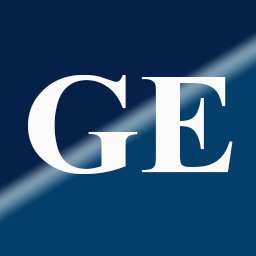
<style>
.page{position:relative;width:256px;height:256px;background:#043e6a}
.page>*{position:absolute;margin:0}
.t1{font:144px "TimesNewRomanPS-BoldMT";color:#fbfbfc;scale:1.04 1}
</style>
<div class="page">
<p class="t1" style="left:28px;top:75px;width:205px;height:99px">GE</p>
</div>
